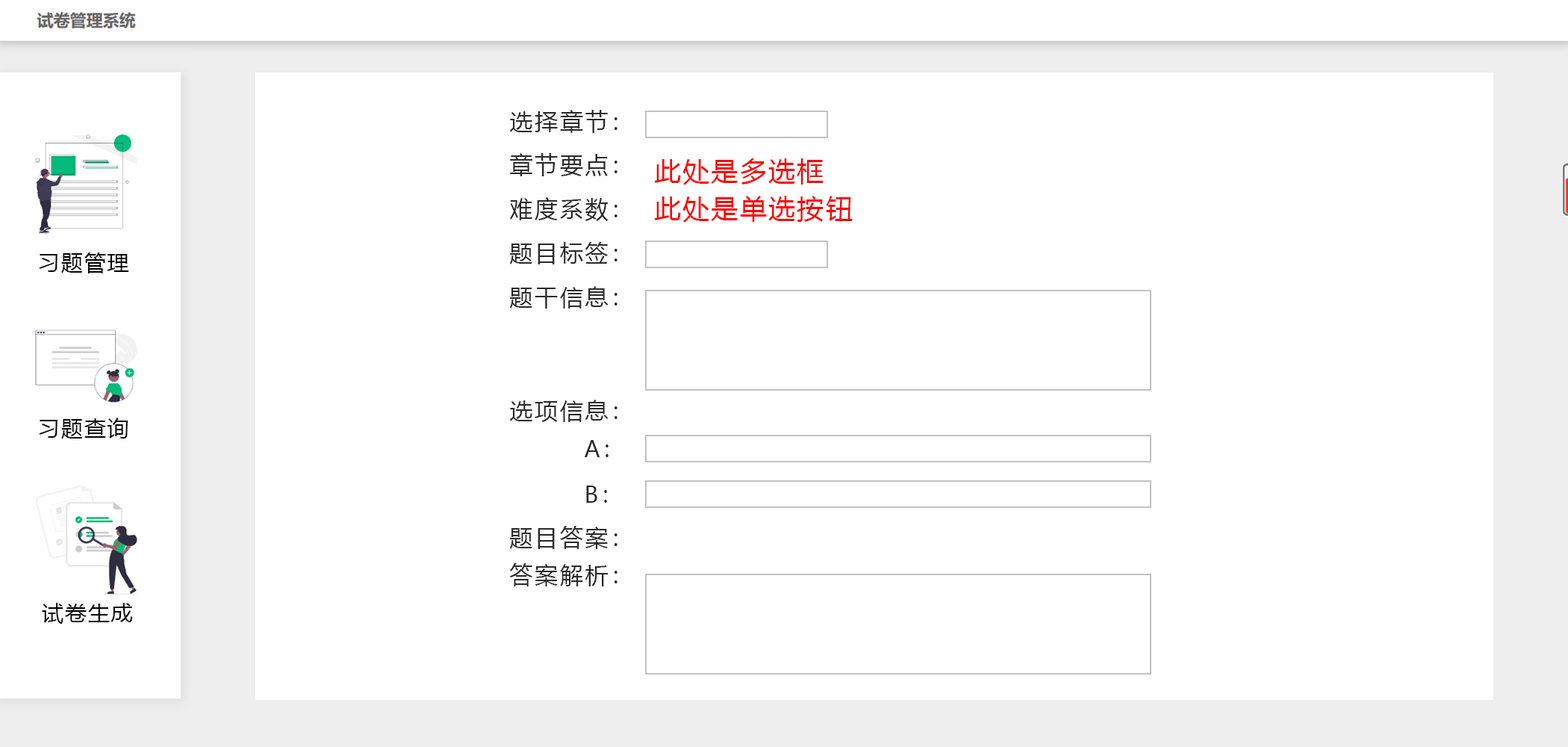
<style>
.page{position:relative;width:1568px;height:747px;background:#ffffff}
.page>*{position:absolute;margin:0}
.t1{font:23.3px "MicrosoftYaHei";letter-spacing:0.075em;color:#292929}
.t2{font:26.6px "MicrosoftYaHei";letter-spacing:0.075em;color:#ff0000}
.t3{font:21.4px "MicrosoftYaHei";letter-spacing:0.075em;color:#000000}
.t4{font:22.1px "MicrosoftYaHei";letter-spacing:0.075em;color:#292929}
</style>
<div class="page">
<p class="t1" style="left:510px;top:110px;width:107px;height:23px">选择章节：</p>
<p class="t1" style="left:510px;top:153px;width:107px;height:23px">章节要点：</p>
<p class="t2" style="left:654px;top:158px;width:170px;height:27px">此处是多选框</p>
<p class="t1" style="left:509px;top:197px;width:108px;height:24px">难度系数：</p>
<p class="t2" style="left:654px;top:196px;width:199px;height:27px">此处是单选按钮</p>
<p class="t1" style="left:510px;top:242px;width:107px;height:22px">题目标签：</p>
<p class="t3" style="left:39px;top:252px;width:90px;height:21px">习题管理</p>
<p class="t1" style="left:510px;top:286px;width:107px;height:22px">题干信息：</p>
<p class="t1" style="left:510px;top:399px;width:107px;height:23px">选项信息：</p>
<p class="t3" style="left:39px;top:417px;width:89px;height:22px">习题查询</p>
<p class="t4" style="left:584px;top:440px;width:25px;height:17px">A：</p>
<p class="t4" style="left:586px;top:485px;width:21px;height:18px">B：</p>
<p class="t1" style="left:510px;top:526px;width:107px;height:23px">题目答案：</p>
<p class="t1" style="left:509px;top:563px;width:108px;height:23px">答案解析：</p>
<p class="t3" style="left:42px;top:603px;width:91px;height:20px">试卷生成</p>
</div>
